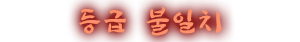
<style>
.page{position:relative;width:300px;height:42px;background:#ffffff}
.page>*{position:absolute;margin:0}
.t1{font:29.3px "SangSangRockOTF";letter-spacing:0.12em;color:#ff916a;scale:1.05 1}
</style>
<div class="page">
<p class="t1" style="left:79px;top:7px;width:143px;height:29px">등급 불일치</p>
</div>
